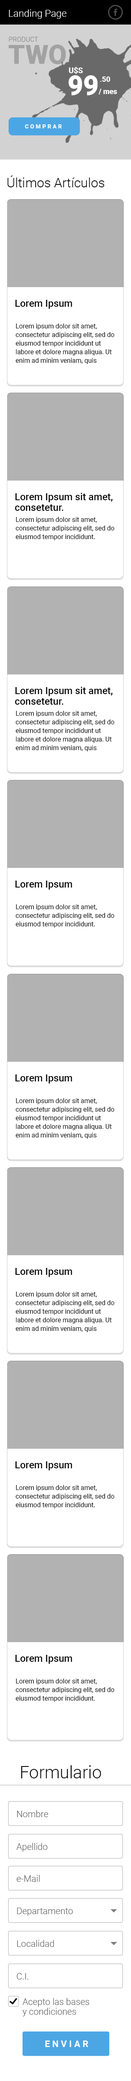
<style>
.page{position:relative;width:131px;height:2081px;background:#ffffff}
.page>*{position:absolute;margin:0}
.t1{font:9.8px "Roboto-Light";color:#ffffff}
.t2{font:6.6px "Roboto-Light";color:#858585;text-transform:uppercase}
.t3{font:26.5px "Roboto-Black";color:#a2a2a2}
.t4{font:27.3px "Roboto-Black";color:#ffffff}
.t5{font:7.7px "Roboto-Black";color:#ffffff}
.t6{font:7.3px "Roboto-Black";color:#ffffff}
.t7{font:5.6px "Roboto-Bold";letter-spacing:0.3em;color:#ffffff;text-transform:uppercase}
.t8{font:13.1px "Roboto-Light";color:#000000}
.t9{font:9.8px "Roboto-Medium";color:#000000}
.t10{font:6.5px/8.6px "Roboto-Regular";color:#000000}
.t11{font:9.8px/10.6px "Roboto-Medium";color:#000000}
.t12{font:17.2px "Roboto-Light";color:#000000}
.t13{font:9px "Roboto-Light";color:#666666}
.t14{font:9px/9.8px "Roboto-Light";color:#666666}
.t15{font:9px "Roboto-Bold";letter-spacing:0.26em;color:#ffffff}
</style>
<div class="page">
<p class="t1" style="left:9px;top:9px;width:58px;height:10px">Landing Page</p>
<p class="t2" style="left:9px;top:37px;width:29px;height:5px">Product</p>
<p class="t3" style="left:9px;top:45px;width:57px;height:19px">TWO</p>
<p class="t4" style="left:68px;top:75px;width:30px;height:20px">99</p>
<p class="t5" style="left:69px;top:67px;width:14px;height:7px">U$S</p>
<p class="t6" style="left:100px;top:76px;width:10px;height:6px">.50</p>
<p class="t6" style="left:99px;top:89px;width:18px;height:5px">/ mes</p>
<p class="t7" style="left:25px;top:124px;width:37px;height:4px">COMPRAR</p>
<p class="t8" style="left:7px;top:176px;width:97px;height:11px">Últimos Artículos</p>
<p class="t9" style="left:15px;top:300px;width:57px;height:9px">Lorem Ipsum</p>
<p class="t10" style="left:16px;top:324px;width:98px;height:40px">Lorem ipsum dolor sit amet, consectetur adipiscing elit, sed do eiusmod tempor incididunt ut labore et dolore magna aliqua. Ut enim ad minim veniam, quis nostrud exercitation ullamco laboris nisi ut aliquip ex ea commodo consequat.</p>
<p class="t11" style="left:15px;top:493px;width:97px;height:18px">Lorem Ipsum sit amet,<br>consetetur.</p>
<p class="t10" style="left:16px;top:517px;width:98px;height:23px">Lorem ipsum dolor sit amet, consectetur adipiscing elit, sed do eiusmod tempor incididunt.</p>
<p class="t11" style="left:15px;top:687px;width:97px;height:18px">Lorem Ipsum sit amet,<br>consetetur.</p>
<p class="t10" style="left:16px;top:711px;width:98px;height:41px">Lorem ipsum dolor sit amet, consectetur adipiscing elit, sed do eiusmod tempor incididunt ut labore et dolore magna aliqua. Ut enim ad minim veniam, quis nostrud exercitation ullamco laboris nisi ut aliquip ex ea commodo consequat.</p>
<p class="t9" style="left:15px;top:881px;width:57px;height:9px">Lorem Ipsum</p>
<p class="t10" style="left:16px;top:904px;width:98px;height:24px">Lorem ipsum dolor sit amet, consectetur adipiscing elit, sed do eiusmod tempor incididunt.</p>
<p class="t9" style="left:15px;top:1075px;width:57px;height:9px">Lorem Ipsum</p>
<p class="t10" style="left:16px;top:1098px;width:98px;height:41px">Lorem ipsum dolor sit amet, consectetur adipiscing elit, sed do eiusmod tempor incididunt ut labore et dolore magna aliqua. Ut enim ad minim veniam, quis nostrud exercitation ullamco laboris nisi ut aliquip ex ea commodo consequat.</p>
<p class="t9" style="left:15px;top:1268px;width:57px;height:9px">Lorem Ipsum</p>
<p class="t10" style="left:16px;top:1292px;width:98px;height:40px">Lorem ipsum dolor sit amet, consectetur adipiscing elit, sed do eiusmod tempor incididunt ut labore et dolore magna aliqua. Ut enim ad minim veniam, quis nostrud exercitation ullamco laboris nisi ut aliquip ex ea commodo consequat.</p>
<p class="t9" style="left:15px;top:1462px;width:57px;height:9px">Lorem Ipsum</p>
<p class="t10" style="left:16px;top:1485px;width:98px;height:24px">Lorem ipsum dolor sit amet, consectetur adipiscing elit, sed do eiusmod tempor incididunt.</p>
<p class="t9" style="left:15px;top:1655px;width:57px;height:9px">Lorem Ipsum</p>
<p class="t10" style="left:16px;top:1679px;width:98px;height:23px">Lorem ipsum dolor sit amet, consectetur adipiscing elit, sed do eiusmod tempor incididunt.</p>
<p class="t12" style="left:21px;top:1766px;width:80px;height:13px">Formulario</p>
<p class="t13" style="left:17px;top:1811px;width:31px;height:7px">Nombre</p>
<p class="t13" style="left:16px;top:1843px;width:31px;height:9px">Apellido</p>
<p class="t13" style="left:16px;top:1875px;width:24px;height:7px">e-Mail</p>
<p class="t13" style="left:17px;top:1908px;width:56px;height:8px">Departamento</p>
<p class="t13" style="left:17px;top:1940px;width:37px;height:7px">Localidad</p>
<p class="t13" style="left:17px;top:1973px;width:11px;height:7px">C.I.</p>
<p class="t14" style="left:22px;top:1998px;width:67px;height:19px">Acepto las bases<br>y condiciones</p>
<p class="t15" style="left:45px;top:2041px;width:43px;height:7px">ENVIAR</p>
</div>
